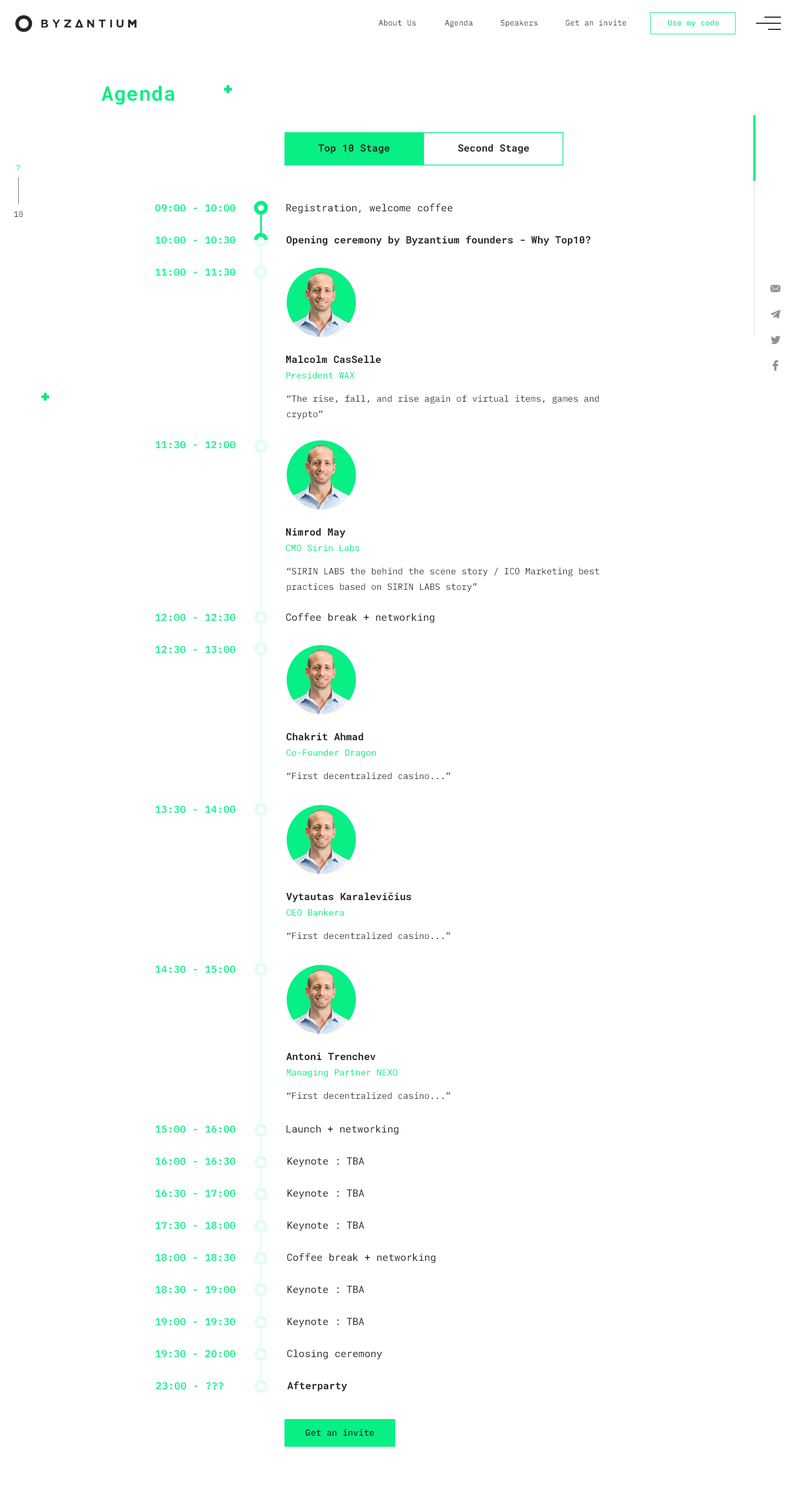
<style>
.page{position:relative;width:797px;height:1496px;background:#ffffff}
.page>*{position:absolute;margin:0}
.t1{font:7.7px "IBMPlexMono";letter-spacing:0.01em;color:#252525}
.t2{font:7.7px "IBMPlexMono-Medium";letter-spacing:0.01em;color:#08ef85}
.t3{font:19.9px "RobotoMono-Bold";letter-spacing:0.025em;color:#08ef85}
.t4{font:10px "RobotoMono-Bold";color:#252525}
.t5{font:7.7px "IBMPlexMono";color:#08ef85}
.t6{font:10px "IBMPlexMono-SemiBold";letter-spacing:0.025em;color:#08ef85}
.t7{font:10px "RobotoMono-Regular";color:#252525}
.t8{font:7.7px "IBMPlexMono";color:#252525}
.t9{font:10px/15.5px "RobotoMono-Bold";color:#252525}
.t10{font:8.9px/15.5px "RobotoMono-Regular";color:#08ef85}
.t11{font:8.9px/15.5px "IBMPlexMono";color:#252525}
.t12{font:8.9px "IBMPlexMono";color:#252525}
.t13{font:8.9px "IBMPlexMono-Medium";color:#252525}
</style>
<div class="page">
<p class="t1" style="left:379px;top:19px;width:37px;height:7px">About Us</p>
<p class="t1" style="left:445px;top:19px;width:28px;height:8px">Agenda</p>
<p class="t1" style="left:500px;top:19px;width:37px;height:8px">Speakers</p>
<p class="t1" style="left:566px;top:19px;width:60px;height:7px">Get an invite</p>
<p class="t2" style="left:668px;top:19px;width:51px;height:8px">Use my code</p>
<p class="t3" style="left:101px;top:86px;width:74px;height:19px">Agenda</p>
<p class="t4" style="left:318px;top:144px;width:72px;height:10px">Top 10 Stage</p>
<p class="t4" style="left:458px;top:144px;width:71px;height:10px">Second Stage</p>
<p class="t5" style="left:17px;top:165px;width:3px;height:5px">7</p>
<p class="t6" style="left:155px;top:204px;width:80px;height:8px">09:00 - 10:00</p>
<p class="t7" style="left:286px;top:204px;width:167px;height:10px">Registration, welcome coffee</p>
<p class="t8" style="left:14px;top:211px;width:9px;height:6px">10</p>
<p class="t6" style="left:156px;top:236px;width:79px;height:8px">10:00 - 10:30</p>
<p class="t4" style="left:286px;top:236px;width:304px;height:10px">Opening ceremony by Byzantium founders - Why Top10?</p>
<p class="t6" style="left:156px;top:268px;width:79px;height:8px">11:00 - 11:30</p>
<p class="t9" style="left:286px;top:355px;width:95px;height:24px">Malcolm CasSelle<br><span class="t10">President WAX</span></p>
<p class="t11" style="left:287px;top:395px;width:312px;height:24px">“The rise, fall, and rise again of virtual items, games and crypto”</p>
<p class="t6" style="left:156px;top:441px;width:79px;height:8px">11:30 - 12:00</p>
<p class="t10" style="left:286px;top:528px;width:74px;height:24px"><span class="t9">Nimrod May<br></span>CMO Sirin Labs</p>
<p class="t11" style="left:287px;top:568px;width:312px;height:24px">“SIRIN LABS the behind the scene story / ICO Marketing best practices based on SIRIN LABS story”</p>
<p class="t6" style="left:156px;top:614px;width:79px;height:7px">12:00 - 12:30</p>
<p class="t7" style="left:286px;top:613px;width:148px;height:10px">Coffee break + networking</p>
<p class="t6" style="left:156px;top:646px;width:79px;height:8px">12:30 - 13:00</p>
<p class="t10" style="left:286px;top:733px;width:90px;height:25px"><span class="t9">Chakrit Ahmad<br></span>Co-Founder Dragon</p>
<p class="t12" style="left:287px;top:773px;width:163px;height:7px">“First decentralized casino...”</p>
<p class="t6" style="left:156px;top:806px;width:79px;height:7px">13:30 - 14:00</p>
<p class="t9" style="left:286px;top:893px;width:125px;height:23px">Vytautas Karalevičius<br><span class="t10">CEO Bankera</span></p>
<p class="t12" style="left:287px;top:932px;width:163px;height:8px">“First decentralized casino...”</p>
<p class="t6" style="left:156px;top:966px;width:79px;height:7px">14:30 - 15:00</p>
<p class="t10" style="left:286px;top:1053px;width:111px;height:25px"><span class="t9">Antoni Trenchev<br></span>Managing Partner NEXO</p>
<p class="t12" style="left:287px;top:1092px;width:163px;height:8px">“First decentralized casino...”</p>
<p class="t6" style="left:156px;top:1126px;width:79px;height:7px">15:00 - 16:00</p>
<p class="t7" style="left:286px;top:1125px;width:112px;height:10px">Launch + networking</p>
<p class="t6" style="left:156px;top:1158px;width:79px;height:7px">16:00 - 16:30</p>
<p class="t7" style="left:287px;top:1158px;width:77px;height:9px">Keynote : TBA</p>
<p class="t6" style="left:156px;top:1190px;width:79px;height:8px">16:30 - 17:00</p>
<p class="t7" style="left:287px;top:1190px;width:77px;height:9px">Keynote : TBA</p>
<p class="t6" style="left:156px;top:1222px;width:79px;height:8px">17:30 - 18:00</p>
<p class="t7" style="left:287px;top:1222px;width:77px;height:9px">Keynote : TBA</p>
<p class="t6" style="left:156px;top:1254px;width:79px;height:8px">18:00 - 18:30</p>
<p class="t7" style="left:287px;top:1253px;width:149px;height:10px">Coffee break + networking</p>
<p class="t6" style="left:156px;top:1286px;width:79px;height:8px">18:30 - 19:00</p>
<p class="t7" style="left:287px;top:1286px;width:77px;height:9px">Keynote : TBA</p>
<p class="t6" style="left:156px;top:1318px;width:79px;height:8px">19:00 - 19:30</p>
<p class="t7" style="left:287px;top:1318px;width:77px;height:10px">Keynote : TBA</p>
<p class="t7" style="left:287px;top:1350px;width:95px;height:10px">Closing ceremony</p>
<p class="t6" style="left:156px;top:1350px;width:79px;height:8px">19:30 - 20:00</p>
<p class="t6" style="left:156px;top:1382px;width:67px;height:8px">23:00 - ???</p>
<p class="t4" style="left:287px;top:1382px;width:60px;height:10px">Afterparty</p>
<p class="t13" style="left:305px;top:1429px;width:69px;height:8px">Get an invite</p>
</div>
